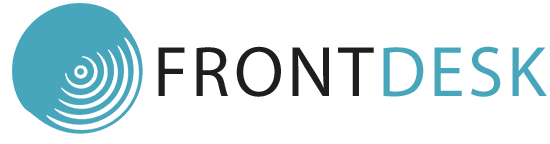
<style>
.page{position:relative;width:550px;height:144px;background:#ffffff}
.page>*{position:absolute;margin:0}
.t1{font:72px "MyriadPro-Regular";letter-spacing:0.05em;color:#1e1e1e}
.t2{font:72px "MyriadPro-Regular";letter-spacing:0.05em;color:#47a6bb}
</style>
<div class="page">
<p class="t1" style="left:158px;top:46px;width:216px;height:51px">FRONT</p>
<p class="t2" style="left:383px;top:46px;width:164px;height:51px">DESK</p>
</div>
